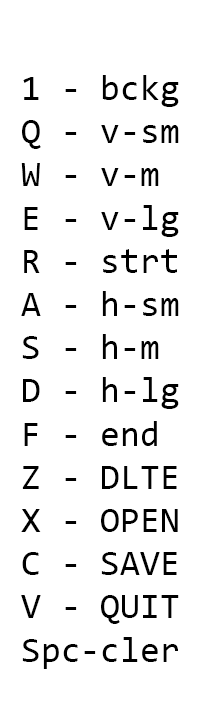
<style>
.page{position:relative;width:200px;height:720px;background:#ffffff}
.page>*{position:absolute;margin:0}
.t1{font:36px "Consolas";color:#000000}
</style>
<div class="page">
<p class="t1" style="left:21px;top:75px;width:158px;height:594px">1 - bckg<br>Q - v-sm <br>W - v-m<br>E - v-lg<br>R - strt<br>A - h-sm<br>S - h-m<br>D - h-lg<br>F - end<br>Z - DLTE<br>X - OPEN<br>C - SAVE<br>V - QUIT<br>Spc-cler</p>
</div>
